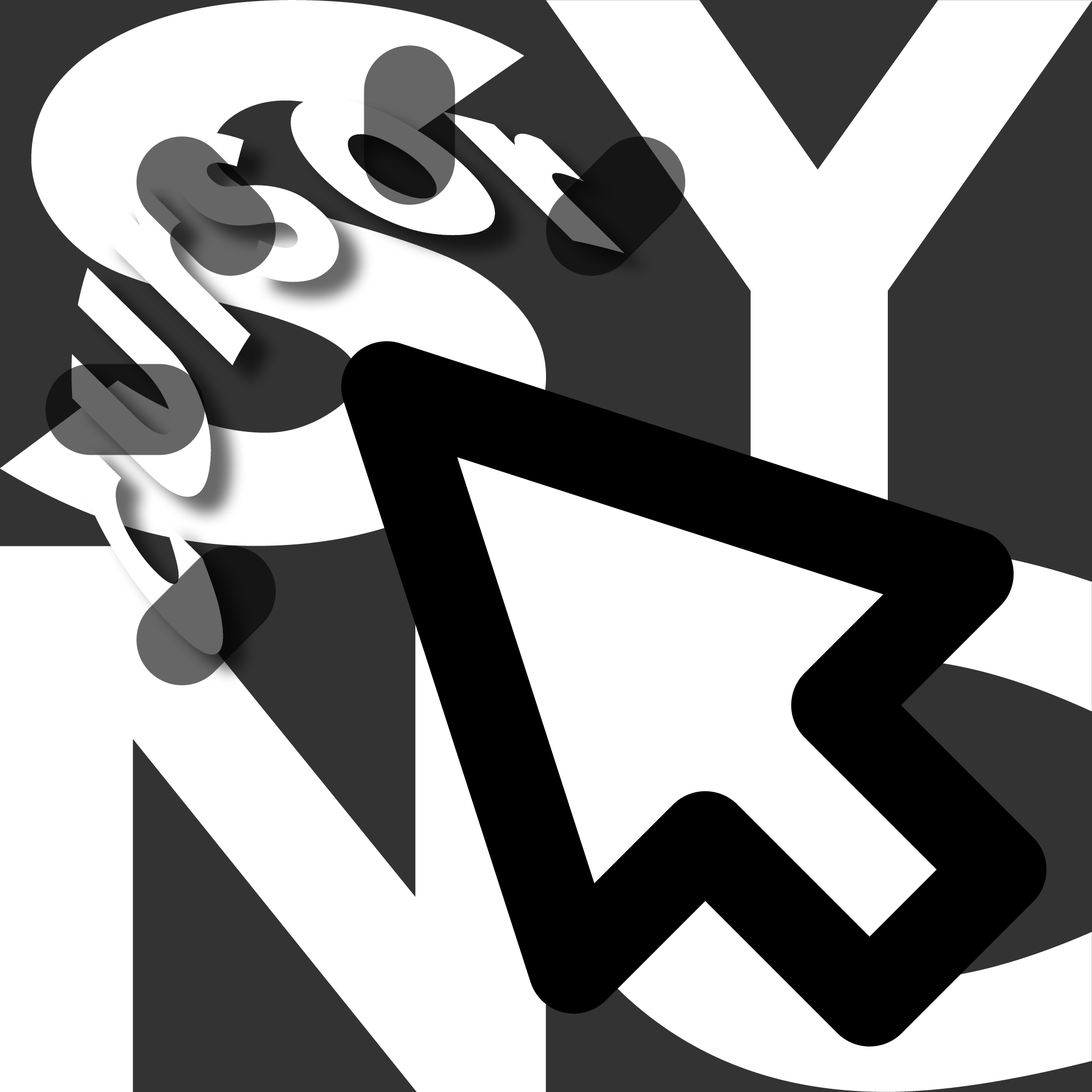
<style>
.page{position:relative;width:1092px;height:1092px;background:#ffffff}
.page>*{position:absolute;margin:0}
.t1{font:828.9px "TwCenMT-Bold";color:#ffffff;scale:1.57 1}
.t2{font:851.3px "TwCenMT-Bold";color:#ffffff;scale:1.18 1}
.t3{font:851.3px "TwCenMT-Bold";color:#ffffff;scale:1.13 1}
.t4{font:829px "TwCenMT-Bold";color:#ffffff;scale:1.32 1}
</style>
<div class="page">
<p class="t1" style="left:0px;top:0px;width:546px;height:546px">S</p>
<p class="t2" style="left:546px;top:0px;width:546px;height:546px">Y</p>
<p class="t3" style="left:0px;top:546px;width:546px;height:546px">N</p>
<p class="t4" style="left:546px;top:546px;width:546px;height:546px">C</p>
</div>
